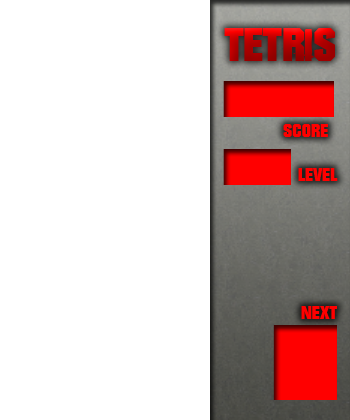
<style>
.page{position:relative;width:350px;height:420px;background:#ffffff}
.page>*{position:absolute;margin:0}
.t1{font:46.2px "Autumn"}
.t2{font:46.2px "60sekuntia"}
.t3{font:18.5px "Autumn";color:#ff0000}
</style>
<div class="page">
<p class="t1" style="left:224px;top:28px;width:111px;height:33px">TETR<span class="t2">ı</span>S</p>
<p class="t3" style="left:283px;top:124px;width:45px;height:13px">SCORE</p>
<p class="t3" style="left:298px;top:168px;width:40px;height:13px">LEVEL</p>
<p class="t3" style="left:301px;top:306px;width:36px;height:13px">NEXT</p>
</div>
